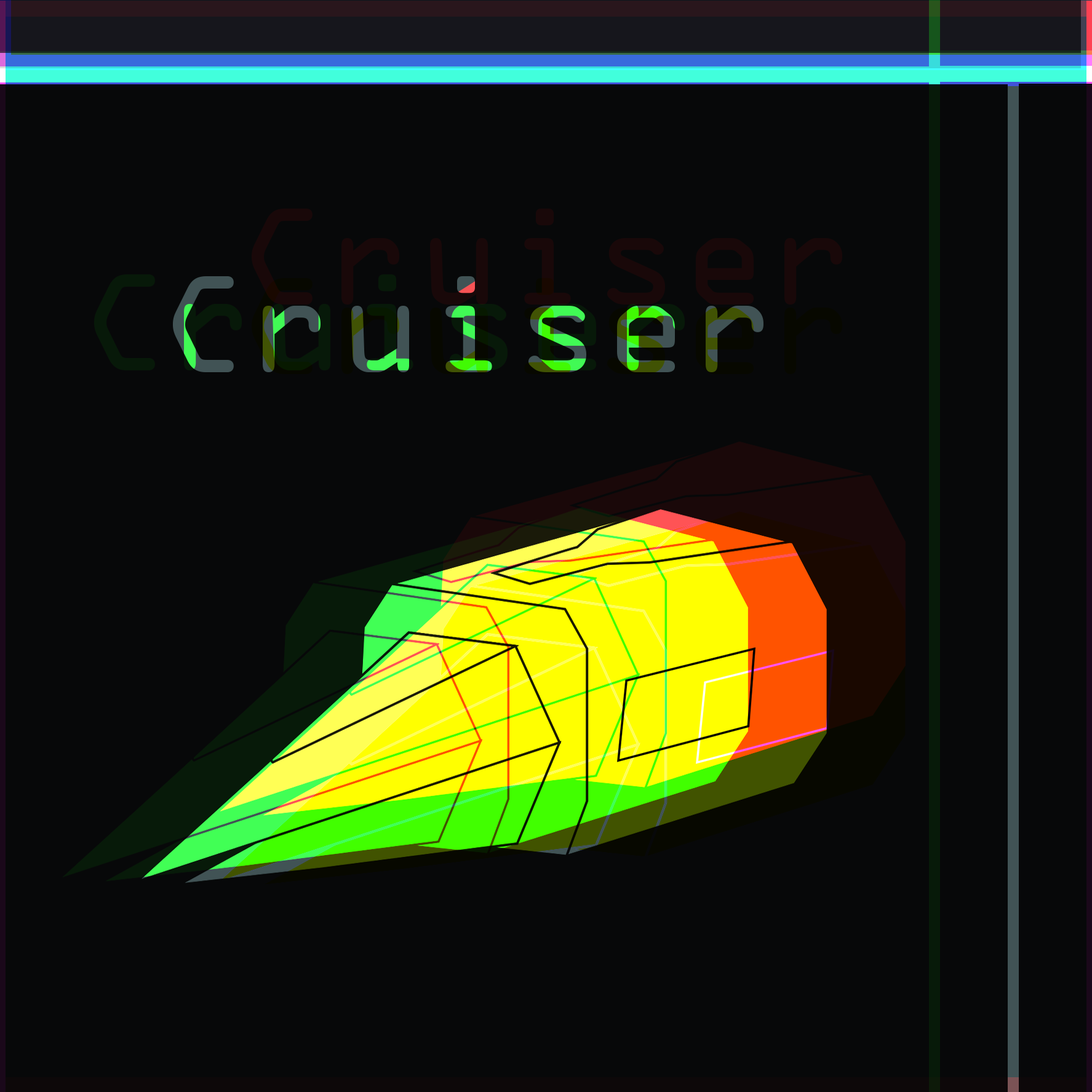
<style>
.page{position:relative;width:1092px;height:1092px;background:#070809}
.page>*{position:absolute;margin:0}
.t1{font:123px "OCRAStd";color:#190809}
</style>
<div class="page">
<p class="t1" style="left:252px;top:207px;width:590px;height:97px">Cruiser</p>
</div>
